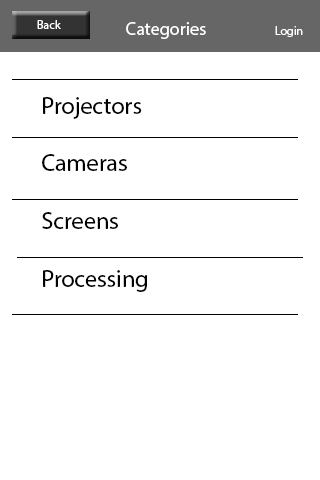
<style>
.page{position:relative;width:320px;height:480px;background:#ffffff}
.page>*{position:absolute;margin:0}
.t1{font:12px "MyriadPro-Regular";color:#ffffff}
.t2{font:18px "MyriadPro-Regular";color:#ffffff}
.t3{font:24px "MyriadPro-Regular";color:#000000}
</style>
<div class="page">
<p class="t1" style="left:37px;top:20px;width:24px;height:9px">Back</p>
<p class="t2" style="left:126px;top:22px;width:80px;height:17px">Categories</p>
<p class="t1" style="left:275px;top:26px;width:28px;height:11px">Login</p>
<p class="t3" style="left:42px;top:97px;width:105px;height:195px">Projectors<br><br>Cameras<br><br>Screens<br><br>Processing</p>
</div>
